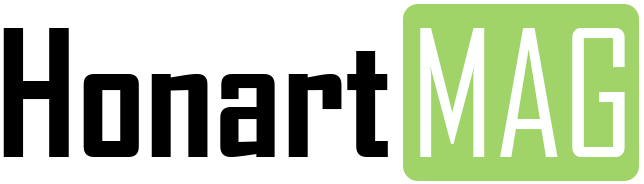
<style>
.page{position:relative;width:644px;height:184px;background:#ffffff}
.page>*{position:absolute;margin:0}
.t1{font:169px "AgencyFB-Bold";color:#000000}
.t2{font:169px "AgencyFB-Reg";color:#feffff}
</style>
<div class="page">
<p class="t1" style="left:3px;top:28px;width:385px;height:129px">Honart</p>
<p class="t2" style="left:420px;top:28px;width:205px;height:129px">MAG</p>
</div>
